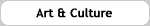
<style>
.page{position:relative;width:150px;height:26px;background:#ffffff}
.page>*{position:absolute;margin:0}
.t1{font:12px "TrebuchetMS";color:#000000;font-weight:bold}
</style>
<div class="page">
<p class="t1" style="left:36px;top:8px;width:76px;height:10px">Art &amp; Culture</p>
</div>
